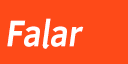
<style>
.page{position:relative;width:128px;height:64px;background:#fe4a18}
.page>*{position:absolute;margin:0}
.t1{font:37.8px "FogSansIt";color:#ffffff;scale:0.87 1}
</style>
<div class="page">
<p class="t1" style="left:7px;top:18px;width:77px;height:31px">Falar</p>
</div>
